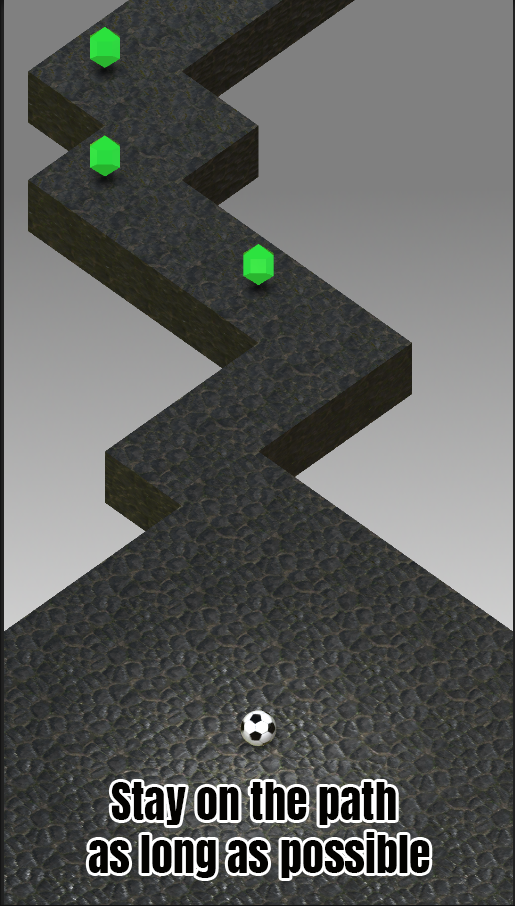
<style>
.page{position:relative;width:515px;height:906px}
.page>*{position:absolute;margin:0}
.t1{font:44px "Anton-Regular";color:#030200}
</style>
<div class="page">
<p class="t1" style="left:88px;top:782px;width:342px;height:96px;text-align:center">Stay on the path <br>as long as possible</p>
</div>
